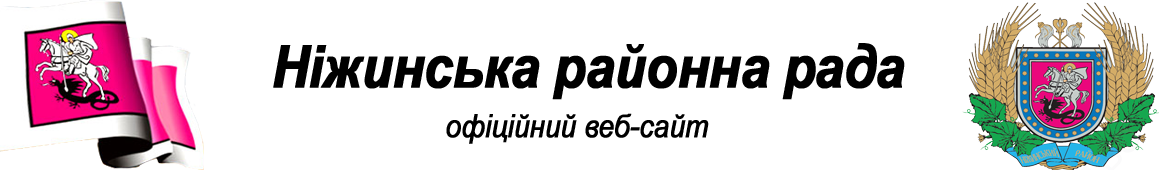
<style>
.page{position:relative;width:1170px;height:170px;background:#ffffff}
.page>*{position:absolute;margin:0}
.t1{font:58.7px "Arial-BoldItalicMT";letter-spacing:-0.025em;color:#000000;font-weight:bold;scale:0.88 1}
.t2{font:32px "Arial-ItalicMT";letter-spacing:-0.025em;color:#000000;font-weight:bold;scale:0.88 1}
</style>
<div class="page">
<p class="t1" style="left:273px;top:43px;width:632px;height:57px">Ніжинська районна рада</p>
<p class="t2" style="left:446px;top:113px;width:263px;height:31px">офіційний веб-сайт</p>
</div>
